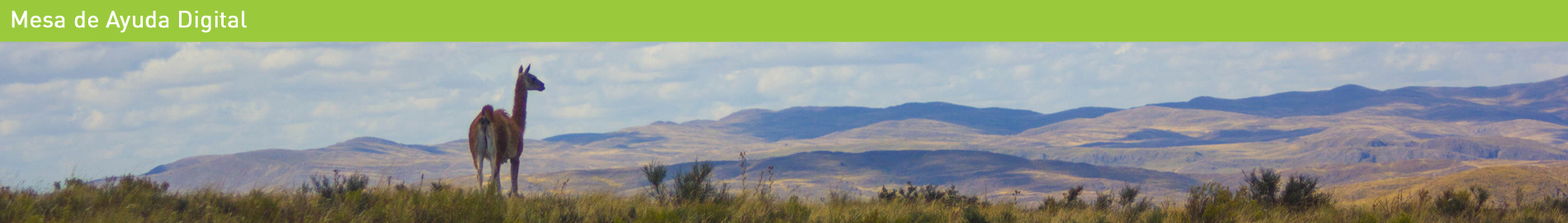
<style>
.page{position:relative;width:1568px;height:223px}
.page>*{position:absolute;margin:0}
.t1{font:23.1px "DINPro";color:#ffffff;font-weight:bold}
</style>
<div class="page">
<p class="t1" style="left:12px;top:11px;width:235px;height:22px">Mesa de Ayuda Digital</p>
</div>
